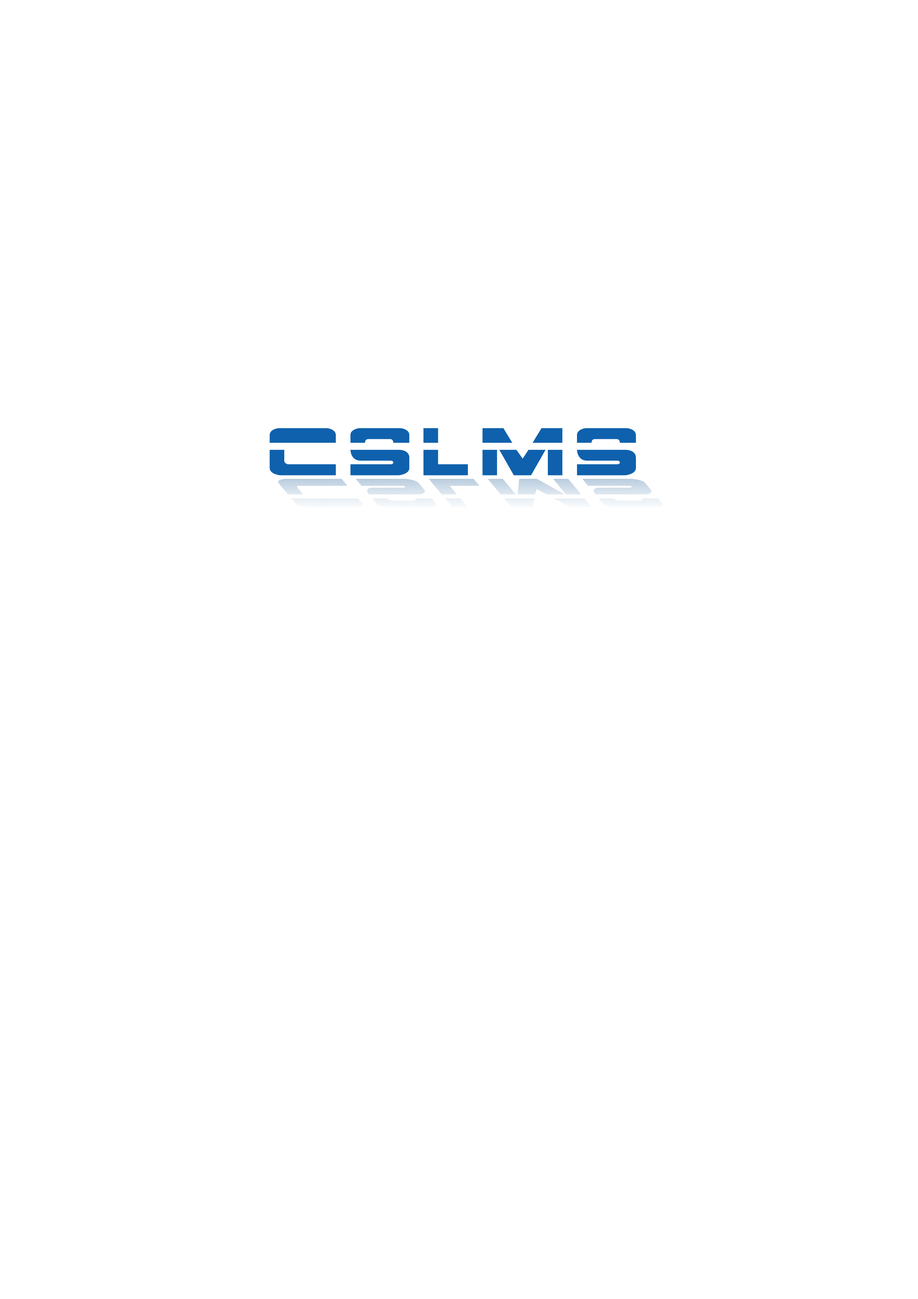
<style>
.page{position:relative;width:918px;height:1299px;background:#ffffff}
.page>*{position:absolute;margin:0}
.t1{font:74px "Borg-9";letter-spacing:0.1em;color:#0f61ad}
</style>
<div class="page">
<p class="t1" style="left:270px;top:428px;width:366px;height:47px">CSLMS</p>
</div>
